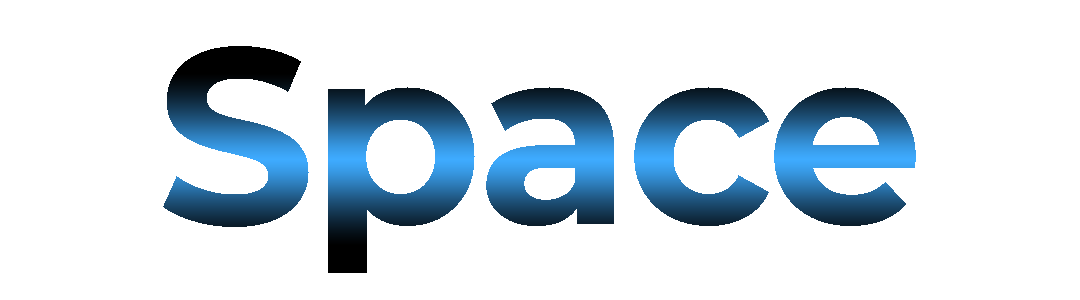
<style>
.page{position:relative;width:1080px;height:300px;background:#ffffff}
.page>*{position:absolute;margin:0}
.t1{font:250px "MontserratRoman-Bold";letter-spacing:-0.02em;font-weight:bold}
</style>
<div class="page">
<p class="t1" style="left:163px;top:46px;width:753px;height:227px">Space</p>
</div>
